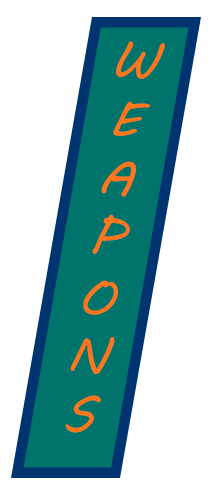
<style>
.page{position:relative;width:216px;height:504px;background:#ffffff}
.page>*{position:absolute;margin:0}
.t1{font:50px "MVBoli";color:#ff761b}
</style>
<div class="page">
<p class="t1" style="left:65px;top:41px;width:100px;height:392px;text-align:center;rotate:9deg">W<br>E<br>A<br>P<br>O<br>N<br>S</p>
</div>
